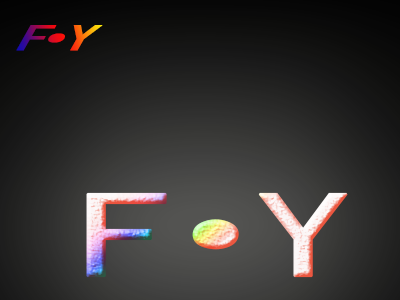
<style>
.page{position:relative;width:400px;height:300px}
.page>*{position:absolute;margin:0}
.t1{font:42.6px "SimHei";font-weight:bold;scale:1.37 1}
.t2{font:122.1px "SimHei";font-weight:bold;scale:1.56 1}
</style>
<div class="page">
<p class="t1" style="left:16px;top:25px;width:87px;height:26px">F·Y</p>
<p class="t2" style="left:86px;top:192px;width:262px;height:86px">F·Y</p>
</div>
